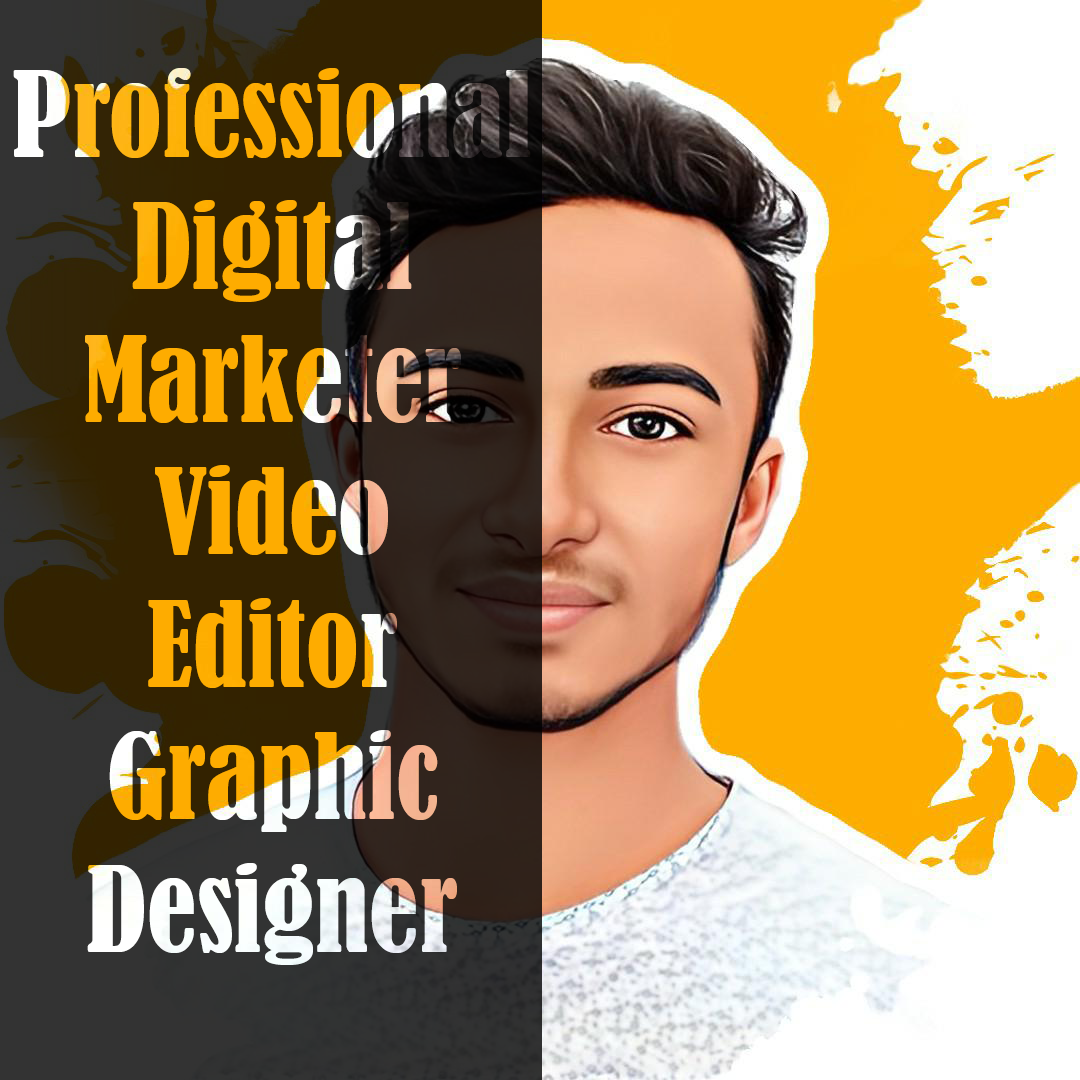
<style>
.page{position:relative;width:1080px;height:1080px}
.page>*{position:absolute;margin:0}
.t1{font:110.4px "BernardMT-Condensed"}
</style>
<div class="page">
<p class="t1" style="left:13px;top:68px;width:518px;height:897px;text-align:center">Professional Digital <br>Marketer  Video <br>Editor  <br>Graphic <br>Designer</p>
</div>
